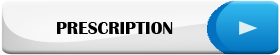
<style>
.page{position:relative;width:280px;height:55px}
.page>*{position:absolute;margin:0}
.t1{font:17.9px "BritannicBold";color:#010101;text-transform:uppercase}
</style>
<div class="page">
<p class="t1" style="left:57px;top:22px;width:116px;height:12px">Prescription</p>
</div>
